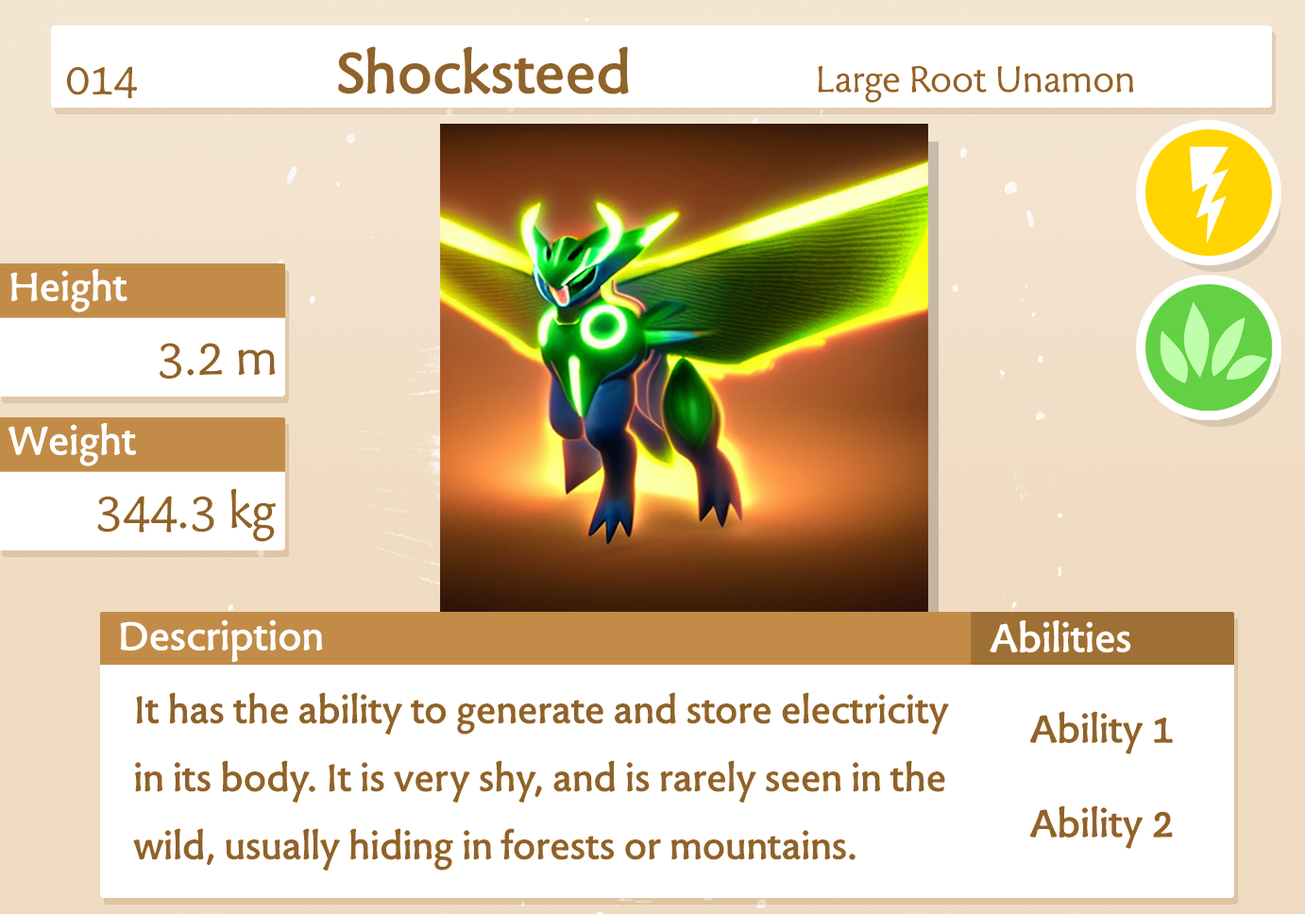
<style>
.page{position:relative;width:1305px;height:914px;background:#ffffff}
.page>*{position:absolute;margin:0}
.t1{font:68px "TuffW01-Bold";color:#8d632f}
.t2{font:49.5px "TuffW01-Normal";color:#8f6530}
.t3{font:42.8px "TuffW01-Normal";color:#8d632f}
.t4{font:46.3px "TuffW01-Bold";color:#ffffff}
.t5{font:56.7px "TuffW01-Normal";color:#8d632f}
.t6{font:44.6px/68px "TuffW01-Bold";color:#8d632f}
.t7{font:45.3px/94.4px "TuffW01-Bold";color:#8d632f}
</style>
<div class="page">
<p class="t1" style="left:338px;top:46px;width:291px;height:48px">Shocksteed</p>
<p class="t2" style="left:66px;top:66px;width:71px;height:32px">014</p>
<p class="t3" style="left:818px;top:66px;width:316px;height:37px">Large Root Unamon</p>
<p class="t4" style="left:10px;top:269px;width:117px;height:44px">Height</p>
<p class="t5" style="left:160px;top:343px;width:116px;height:36px">3.2 m</p>
<p class="t4" style="left:8px;top:423px;width:128px;height:43px">Weight</p>
<p class="t5" style="left:97px;top:488px;width:179px;height:54px">344.3 kg</p>
<p class="t4" style="left:120px;top:619px;width:203px;height:43px">Description</p>
<p class="t4" style="left:989px;top:620px;width:142px;height:32px">Abilities</p>
<p class="t6" style="left:133px;top:692px;width:816px;height:178px">It has the ability to generate and store electricity<br>in its body. It is very shy, and is rarely seen in the<br>wild, usually hiding in forests or mountains.</p>
<p class="t7" style="left:1029px;top:711px;width:144px;height:138px;text-align:center">Ability 1<br>Ability 2</p>
</div>
